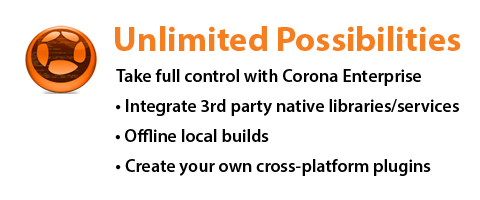
<style>
.page{position:relative;width:480px;height:200px;background:#ffffff}
.page>*{position:absolute;margin:0}
.t1{font:35px "MyriadPro-Bold";color:#f57f20}
.t2{font:18px "MyriadPro-Semibold";color:#000000}
</style>
<div class="page">
<p class="t1" style="left:115px;top:26px;width:346px;height:25px">Unlimited Possibilities</p>
<p class="t2" style="left:116px;top:69px;width:305px;height:17px">Take full control with Corona Enterprise</p>
<p class="t2" style="left:116px;top:99px;width:343px;height:17px">• Integrate 3rd party native libraries/services</p>
<p class="t2" style="left:115px;top:129px;width:154px;height:13px">• Offline local builds</p>
<p class="t2" style="left:116px;top:159px;width:315px;height:17px">• Create your own cross-platform plugins</p>
</div>
